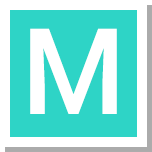
<style>
.page{position:relative;width:152px;height:152px;background:#2ed4c6}
.page>*{position:absolute;margin:0}
.t1{font:120px "Roboto-Medium";color:#ffffff}
</style>
<div class="page">
<p class="t1" style="left:30px;top:28px;width:87px;height:86px">M</p>
</div>
